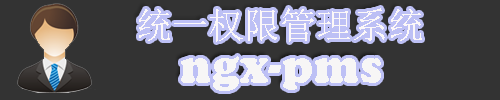
<style>
.page{position:relative;width:500px;height:100px;background:#333333}
.page>*{position:absolute;margin:0}
.t1{font:36px "SimSun";color:#fcf8f8}
.t2{font:48px "CooperBlack";color:#f7f6f6}
</style>
<div class="page">
<p class="t1" style="left:139px;top:8px;width:283px;height:34px">统一权限管理系统</p>
<p class="t2" style="left:181px;top:56px;width:200px;height:35px">ngx-pms</p>
</div>
